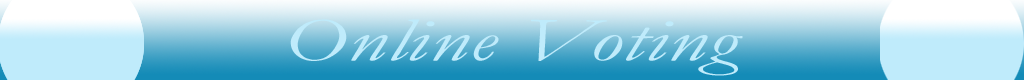
<style>
.page{position:relative;width:1024px;height:80px}
.page>*{position:absolute;margin:0}
.t1{font:62.5px "Garamond-Italic";color:#bfebfb;scale:1.5 1}
</style>
<div class="page">
<p class="t1" style="left:290px;top:19px;width:453px;height:57px">Online Voting</p>
</div>
